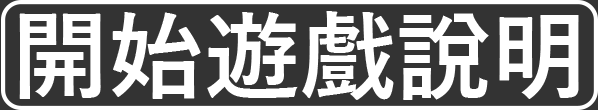
<style>
.page{position:relative;width:598px;height:110px;background:#333333}
.page>*{position:absolute;margin:0}
.t1{font:95.8px "YuGothicUI-Semibold";color:#ffffff}
</style>
<div class="page">
<p class="t1" style="left:19px;top:11px;width:560px;height:89px">開始遊戲說明</p>
</div>
